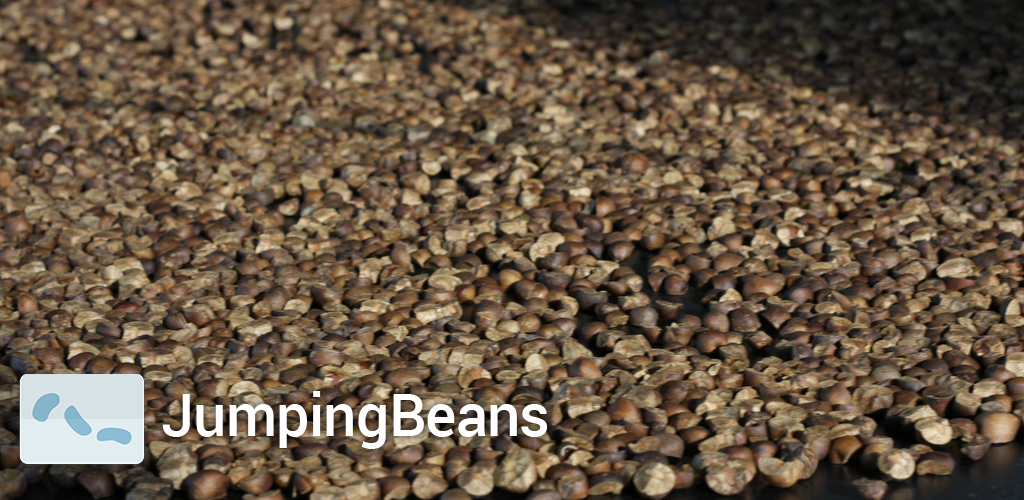
<style>
.page{position:relative;width:1024px;height:500px}
.page>*{position:absolute;margin:0}
.t1{font:59px "Roboto-Medium";color:#ffffff}
</style>
<div class="page">
<p class="t1" style="left:162px;top:391px;width:386px;height:58px">JumpingBeans</p>
</div>
